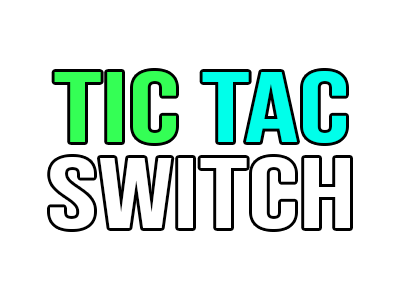
<style>
.page{position:relative;width:400px;height:300px;background:#ffffff}
.page>*{position:absolute;margin:0}
.t1{font:100px "BebasNeue-Regular";color:#34ff55;scale:1.35 1}
.t2{font:100px "BebasNeue-Regular";color:#00ffea;scale:1.35 1}
.t3{font:100px "BebasNeue-Regular";color:#ffffff;scale:1.35 1}
</style>
<div class="page">
<p class="t1" style="left:54px;top:71px;width:292px;height:72px">Tic <span class="t2">TAc</span></p>
<p class="t3" style="left:50px;top:157px;width:300px;height:72px">SWITCH</p>
</div>
